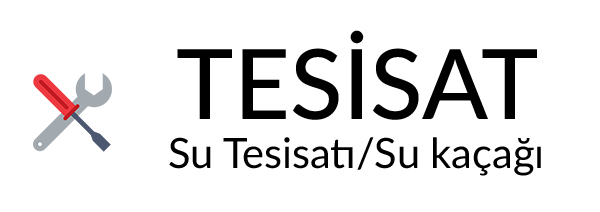
<style>
.page{position:relative;width:600px;height:212px;background:#ffffff}
.page>*{position:absolute;margin:0}
.t1{font:41.5px "Lato-Regular";color:#000000}
.t2{font:97px "Lato-Medium";color:#000000}
</style>
<div class="page">
<p class="t1" style="left:169px;top:30px;width:372px;height:146px;text-align:center"><span class="t2">TESİSAT<br></span>Su Tesisatı/Su kaçağı</p>
</div>
